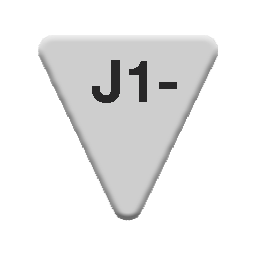
<style>
.page{position:relative;width:256px;height:256px;background:#ffffff}
.page>*{position:absolute;margin:0}
.t1{font:58.6px "HelveticaNeue-Bold";color:#282728}
</style>
<div class="page">
<p class="t1" style="left:92px;top:60px;width:85px;height:43px">J1-</p>
</div>
